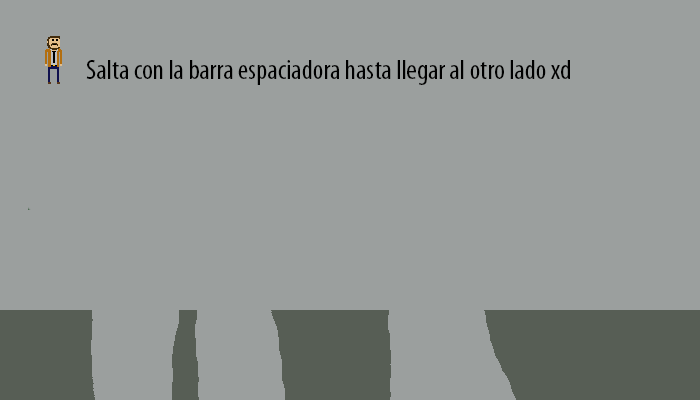
<style>
.page{position:relative;width:700px;height:400px;background:#9b9f9e}
.page>*{position:absolute;margin:0}
.t1{font:28px "MyriadPro-Cond";color:#000000}
</style>
<div class="page">
<p class="t1" style="left:86px;top:60px;width:484px;height:25px">Salta con la barra espaciadora hasta llegar al otro lado xd</p>
</div>
